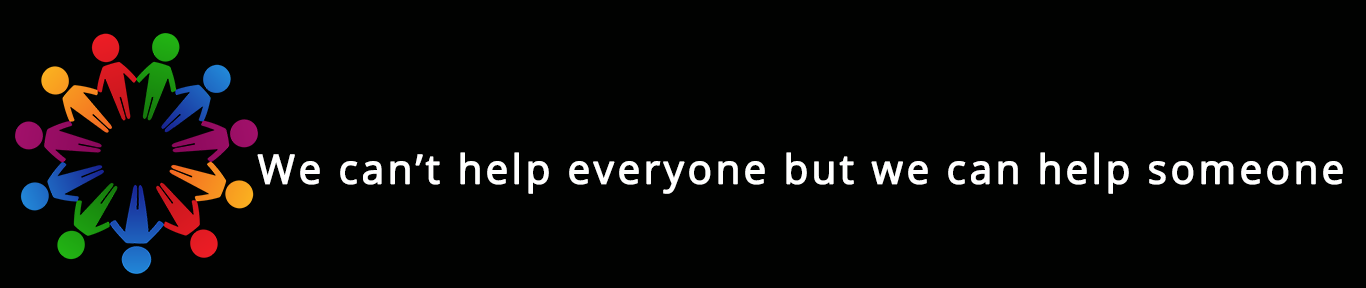
<style>
.page{position:relative;width:1366px;height:288px;background:#010201}
.page>*{position:absolute;margin:0}
.t1{font:40px "OpenSans";letter-spacing:0.06em;color:#ffffff;font-weight:bold}
</style>
<div class="page">
<p class="t1" style="left:257px;top:152px;width:1086px;height:42px">We can’t help everyone but we can help someone</p>
</div>
